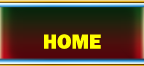
<style>
.page{position:relative;width:144px;height:66px}
.page>*{position:absolute;margin:0}
.t1{font:20.8px "FranklinGothic-Heavy";color:#ffff00}
</style>
<div class="page">
<p class="t1" style="left:44px;top:34px;width:57px;height:15px">HOME</p>
</div>
